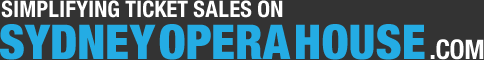
<style>
.page{position:relative;width:484px;height:60px;background:#333333}
.page>*{position:absolute;margin:0}
.t1{font:22.8px/42px "HelveticaNeue-CondensedBold";color:#ffffff;text-transform:uppercase}
.t2{font:48px/42px "HelveticaNeue-CondensedBlack";color:#24ace4;text-transform:uppercase}
.t3{font:27px/42px "HelveticaNeue-CondensedBold";color:#ffffff;text-transform:uppercase}
</style>
<div class="page">
<p class="t1" style="left:0px;top:0px;width:484px;height:60px">SIMPLIFYING TICKET SALES ON<br><span class="t2">SYDNEYOPERAHOUSE</span><span class="t3">.COM</span></p>
</div>
